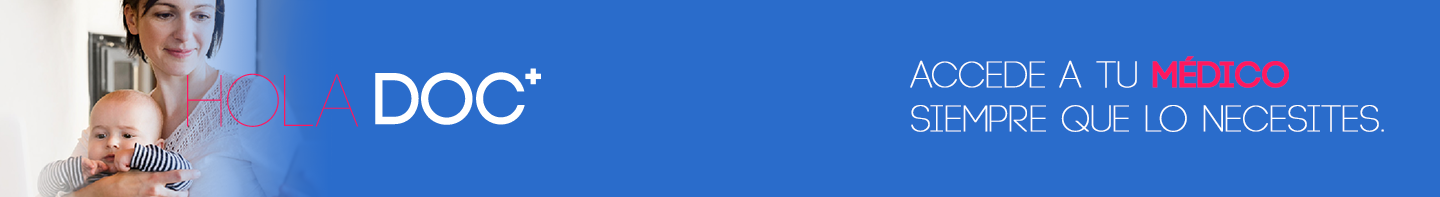
<style>
.page{position:relative;width:1440px;height:197px;background:#2a6ccb}
.page>*{position:absolute;margin:0}
.t1{font:36.6px "Code-Light";color:#ffffff;font-weight:bold}
.t2{font:36.6px "Code-Bold";color:#ff185e;font-weight:bold}
</style>
<div class="page">
<p class="t1" style="left:910px;top:56px;width:474px;height:76px">ACCEDE A TU <span class="t2">MÉDICO<br></span>SIEMPRE QUE LO NECESITES.</p>
</div>
